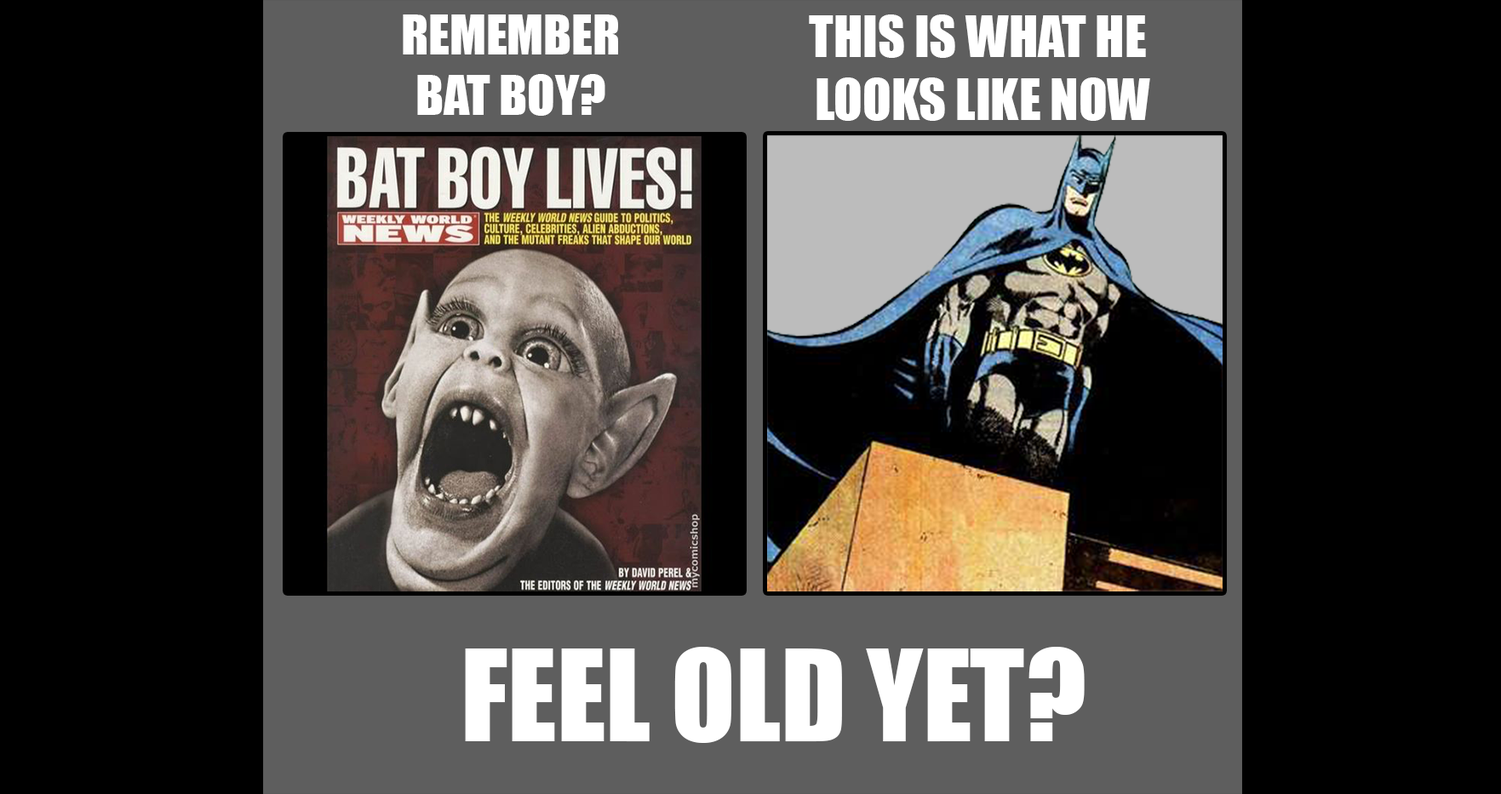
<style>
.page{position:relative;width:1501px;height:794px;background:#000000}
.page>*{position:absolute;margin:0}
.t1{font:50.8px "Impact";color:#ffffff}
.t2{font:52.4px "Impact";color:#ffffff}
.t3{font:117.7px "Impact";color:#ffffff}
</style>
<div class="page">
<p class="t1" style="left:403px;top:14px;width:215px;height:102px;text-align:center">REMEMBER<br>BAT BOY?</p>
<p class="t2" style="left:809px;top:14px;width:341px;height:107px;text-align:center">THIS IS WHAT HE <br>LOOKS LIKE NOW</p>
<p class="t3" style="left:465px;top:647px;width:620px;height:96px">FEEL OLD YET?</p>
</div>
